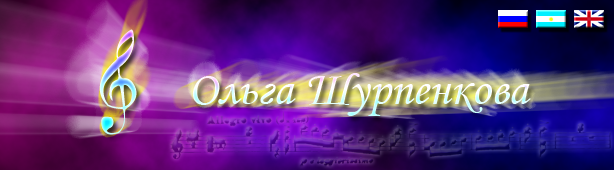
<style>
.page{position:relative;width:614px;height:170px}
.page>*{position:absolute;margin:0}
.t1{font:60px "Clefs";color:#ffffff}
.t2{font:48px "MonotypeCorsiva";color:#ffffff}
</style>
<div class="page">
<p class="t1" style="left:99px;top:29px;width:38px;height:106px">p</p>
<p class="t2" style="left:193px;top:73px;width:338px;height:43px">Ольга Шурпенкова</p>
</div>
